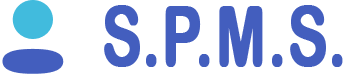
<style>
.page{position:relative;width:343px;height:75px;background:#ffffff}
.page>*{position:absolute;margin:0}
.t1{font:82.7px "ArialRoundedMTBold";color:#435ebe;font-weight:bold;scale:0.73 1}
</style>
<div class="page">
<p class="t1" style="left:104px;top:5px;width:239px;height:62px">S.P.M.S.</p>
</div>
